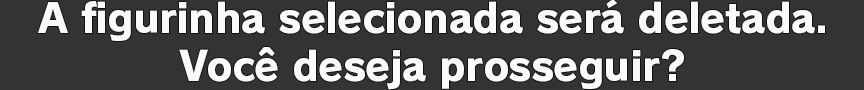
<style>
.page{position:relative;width:864px;height:90px;background:#333333}
.page>*{position:absolute;margin:0}
.t1{font:40px "RodinPro-EB";letter-spacing:-0.015em;color:#fbfafb}
</style>
<div class="page">
<p class="t1" style="left:38px;top:0px;width:787px;height:41px">A figurinha selecionada será deletada.</p>
<p class="t1" style="left:179px;top:47px;width:505px;height:43px">Você deseja prosseguir?</p>
</div>
